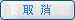
<style>
.page{position:relative;width:75px;height:20px}
.page>*{position:absolute;margin:0}
.t1{font:12px "SimHei";color:#2a7af5}
</style>
<div class="page">
<p class="t1" style="left:23px;top:4px;width:28px;height:11px">取 消</p>
</div>
